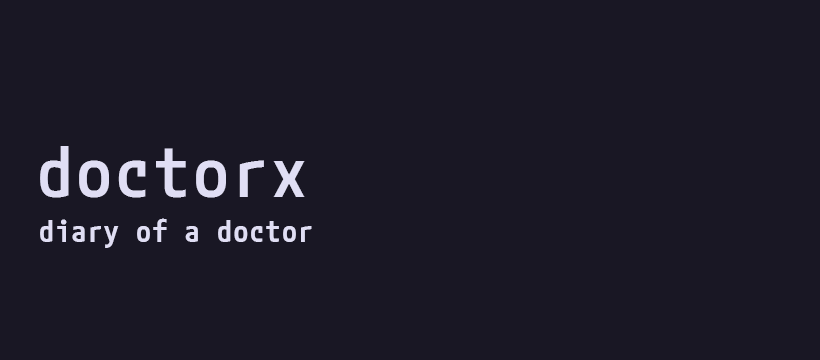
<style>
.page{position:relative;width:820px;height:360px;background:#191724}
.page>*{position:absolute;margin:0}
.t1{font:70px "MPLUSCodeLatin_508.000wght_104.000wdth";letter-spacing:0.04em;color:#e0def4}
.t2{font:30px "MPLUSCodeLatin-SemiBold";letter-spacing:0.04em;color:#e0def4}
</style>
<div class="page">
<p class="t1" style="left:40px;top:146px;width:265px;height:52px">doctorx</p>
<p class="t2" style="left:40px;top:218px;width:272px;height:30px">diary of a doctor</p>
</div>
